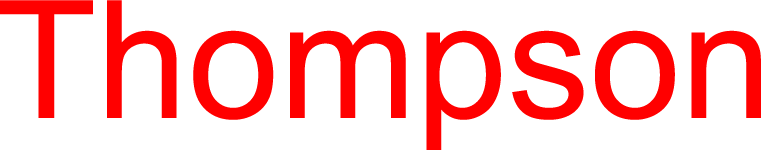
<style>
.page{position:relative;width:761px;height:150px;background:#ffffff}
.page>*{position:absolute;margin:0}
.t1{font:164.1px "ArialMT";color:#ff0000}
</style>
<div class="page">
<p class="t1" style="left:0px;top:0px;width:761px;height:151px">Thompson</p>
</div>
